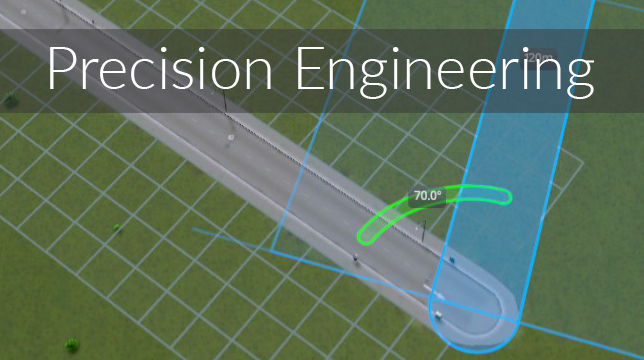
<style>
.page{position:relative;width:644px;height:360px}
.page>*{position:absolute;margin:0}
.t1{font:60px "Lato-Light";color:#ffffff}
</style>
<div class="page">
<p class="t1" style="left:50px;top:47px;width:544px;height:52px">Precision Engineering</p>
</div>
